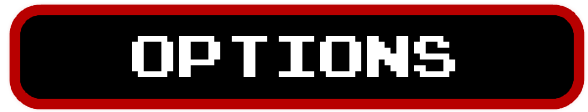
<style>
.page{position:relative;width:588px;height:112px;background:#000000}
.page>*{position:absolute;margin:0}
.t1{font:47px "Super-Mario-Bros.-NES";color:#ffffff}
</style>
<div class="page">
<p class="t1" style="left:132px;top:35px;width:324px;height:42px">OPTIONS</p>
</div>
